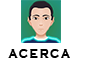
<style>
.page{position:relative;width:85px;height:60px;background:#ffffff}
.page>*{position:absolute;margin:0}
.t1{font:14px "CopperplateGothic-Bold";letter-spacing:0.2em;color:#000000;scale:0.75 1}
</style>
<div class="page">
<p class="t1" style="left:8px;top:49px;width:62px;height:9px">ACERCA</p>
</div>
